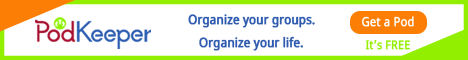
<style>
.page{position:relative;width:468px;height:60px;background:#ffffff}
.page>*{position:absolute;margin:0}
.t1{font:13px "NotoSans";color:#2e5baf;font-weight:bold;scale:0.88 1}
.t2{font:12.6px "NotoSans";color:#feffff;font-weight:bold;scale:0.88 1}
.t3{font:12px "NotoSans";color:#92ef00;font-weight:bold;scale:0.88 1}
</style>
<div class="page">
<p class="t1" style="left:188px;top:14px;width:127px;height:14px">Organize your groups.</p>
<p class="t2" style="left:362px;top:16px;width:52px;height:11px">Get a Pod</p>
<p class="t1" style="left:199px;top:36px;width:104px;height:15px">Organize your life.</p>
<p class="t3" style="left:365px;top:40px;width:45px;height:10px">It’s FREE</p>
</div>
